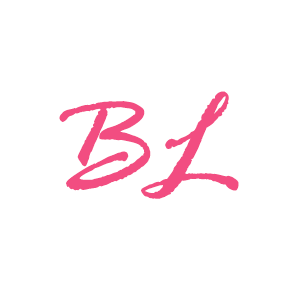
<style>
.page{position:relative;width:300px;height:300px;background:#ffffff}
.page>*{position:absolute;margin:0}
.t1{font:150px "RageItalic";letter-spacing:-0.05em;color:#f24d81}
</style>
<div class="page">
<p class="t1" style="left:59px;top:91px;width:180px;height:108px">BL</p>
</div>
